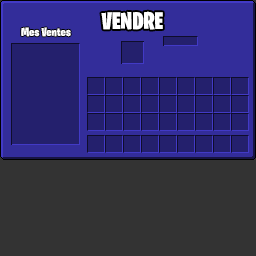
<style>
.page{position:relative;width:256px;height:256px;background:#333333}
.page>*{position:absolute;margin:0}
.t1{font:24px "BurbankBigCondensed-Black";color:#ffffff}
.t2{font:12px "BurbankBigCondensed-Black";color:#ffffff}
</style>
<div class="page">
<p class="t1" style="left:101px;top:11px;width:62px;height:19px">VENDRE</p>
<p class="t2" style="left:21px;top:27px;width:50px;height:10px">Mes Ventes</p>
</div>
